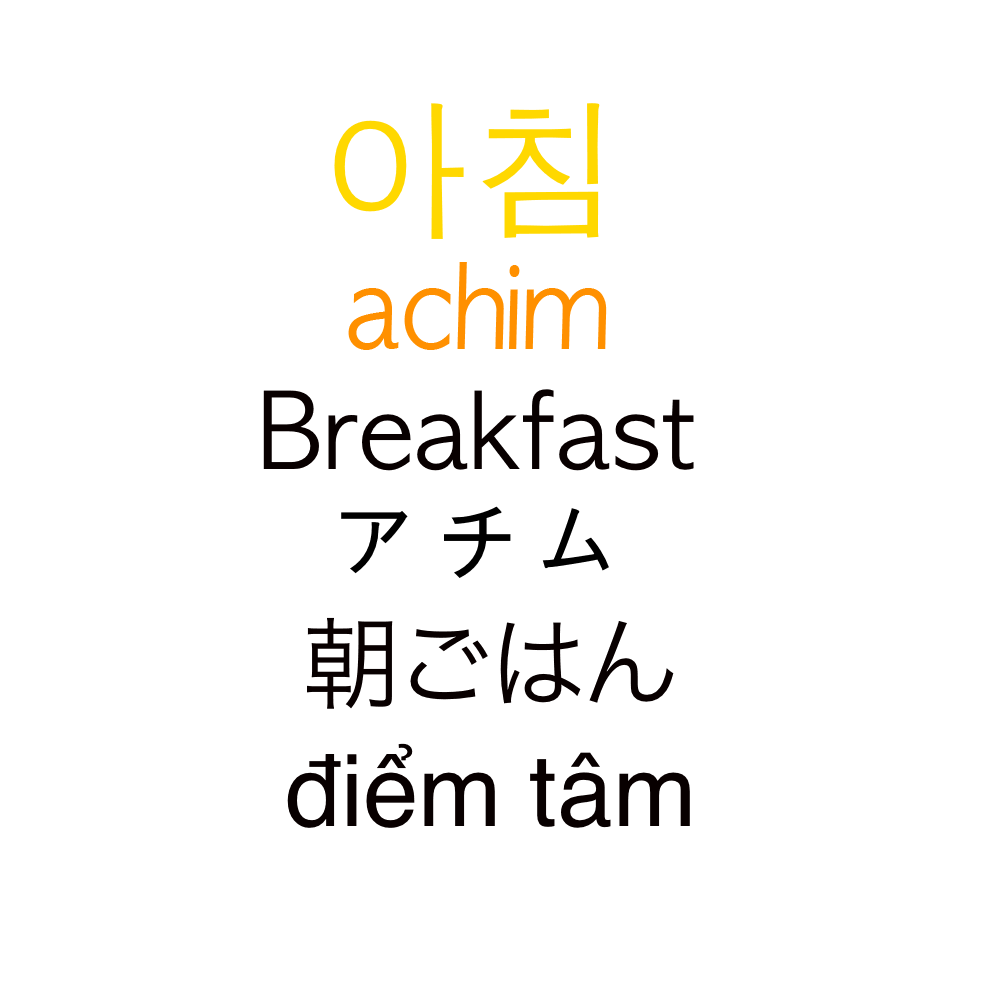
<style>
.page{position:relative;width:1000px;height:1000px;background:#ffffff}
.page>*{position:absolute;margin:0}
.t1{font:150px "AppleGothic";color:#ffd800}
.t2{font:111.2px "AppleGothic";color:#ff9000;scale:0.9 1}
.t3{font:100px "AppleGothic";color:#080000}
.t4{font:100px "AppleGothic";color:#000000}
.t5{font:100px "HiraKakuProN-W3";color:#080000}
.t6{font:100px "Helvetica";color:#080000}
</style>
<div class="page">
<p class="t1" style="left:334px;top:103px;width:266px;height:136px">아침</p>
<p class="t2" style="left:348px;top:262px;width:259px;height:88px">achim</p>
<p class="t3" style="left:263px;top:389px;width:431px;height:82px">Breakfast</p>
<p class="t4" style="left:341px;top:506px;width:268px;height:72px">アチム</p>
<p class="t5" style="left:307px;top:617px;width:367px;height:92px">朝ごはん</p>
<p class="t6" style="left:287px;top:743px;width:403px;height:85px">điểm tâm</p>
</div>
